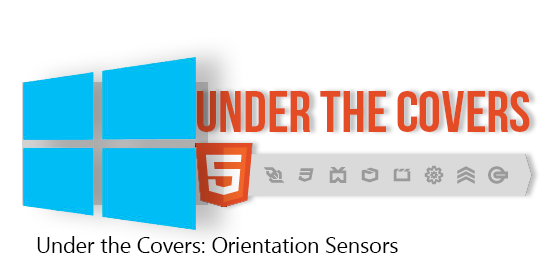
<style>
.page{position:relative;width:558px;height:270px;background:#ffffff}
.page>*{position:absolute;margin:0}
.t1{font:58px "BebasNeue";color:#e44c26}
.t2{font:21.5px "SegoeUI";color:#000000}
</style>
<div class="page">
<p class="t1" style="left:197px;top:91px;width:333px;height:41px">Under the Covers</p>
<p class="t2" style="left:37px;top:236px;width:361px;height:17px">Under the Covers: Orientation Sensors</p>
</div>
